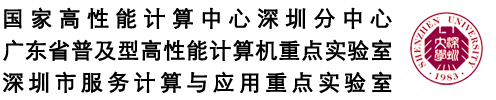
<style>
.page{position:relative;width:496px;height:100px;background:#ffffff}
.page>*{position:absolute;margin:0}
.t1{font:22px/32px "STXihei";letter-spacing:0.02em;color:#000000;font-weight:bold}
.t2{font:22px/32px "STXihei";letter-spacing:0.26em;color:#000000;font-weight:bold}
.t3{font:22px/32px "STXihei";letter-spacing:0.17em;color:#000000;font-weight:bold}
</style>
<div class="page">
<p class="t1" style="left:3px;top:7px;width:389px;height:87px"><span class="t2">国家高性能计算中心深圳分中心<br></span>广东省普及型高性能计算机重点实验室<br><span class="t3">深圳市服务计算与应用重点实验室</span></p>
</div>
